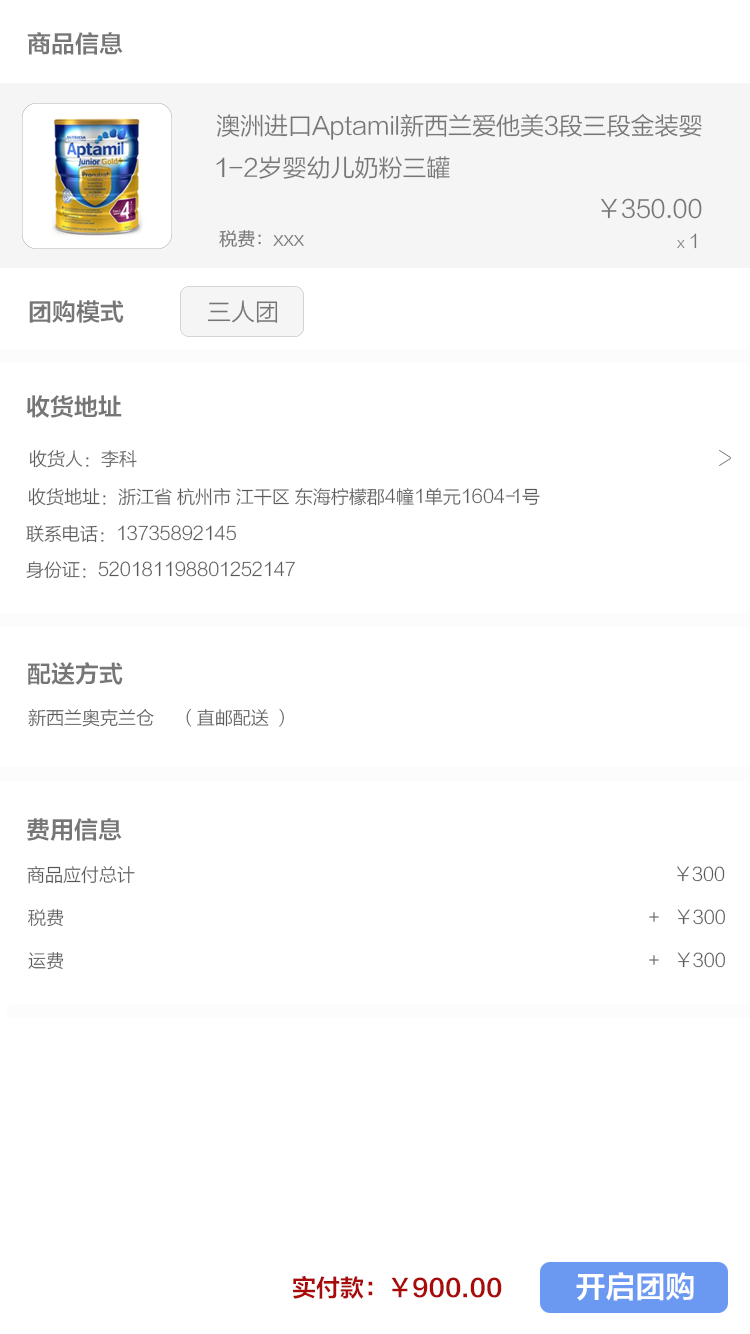
<style>
.page{position:relative;width:750px;height:1334px;background:#ffffff}
.page>*{position:absolute;margin:0}
.t1{font:24px "FZLTZCHK--GBK1-0";color:#767676}
.t2{font:24px "FZLTXIHK--GBK1-0";color:#767676}
.t3{font:18px "FZLTXIHK--GBK1-0";color:#747474}
.t4{font:14px "FZLTXHJW--GB1-0";color:#767676}
.t5{font:18px "FZLTXHJW--GB1-0";color:#767676}
.t6{font:18px "FZLTXHJW--GB1-0";color:#585858}
.t7{font:24px "FZLTZCHK--GBK1-0";color:#a90b0b}
.t8{font:30px "FZLTZCHK--GBK1-0";color:#ffffff}
</style>
<div class="page">
<p class="t1" style="left:27px;top:32px;width:96px;height:23px">商品信息</p>
<p class="t2" style="left:216px;top:114px;width:486px;height:65px">澳洲进口Aptamil新西兰爱他美3段三段金装婴<br>1-2岁婴幼儿奶粉三罐</p>
<p class="t2" style="left:601px;top:198px;width:101px;height:21px">￥350.00</p>
<p class="t3" style="left:219px;top:230px;width:85px;height:18px">税费：xxx</p>
<p class="t4" style="left:677px;top:233px;width:20px;height:16px">x <span class="t5">1</span></p>
<p class="t1" style="left:29px;top:300px;width:95px;height:23px">团购模式</p>
<p class="t2" style="left:207px;top:300px;width:71px;height:23px">三人团</p>
<p class="t1" style="left:26px;top:395px;width:96px;height:23px">收货地址</p>
<p class="t6" style="left:29px;top:450px;width:108px;height:18px">收货人：李科</p>
<p class="t6" style="left:28px;top:488px;width:512px;height:18px">收货地址：浙江省 杭州市 江干区 东海柠檬郡4幢1单元1604-1号</p>
<p class="t6" style="left:26px;top:525px;width:210px;height:18px">联系电话：13735892145</p>
<p class="t6" style="left:26px;top:561px;width:269px;height:18px">身份证：520181198801252147</p>
<p class="t1" style="left:28px;top:662px;width:95px;height:23px">配送方式</p>
<p class="t6" style="left:28px;top:708px;width:256px;height:19px">新西兰奥克兰仓     （直邮配送 ）</p>
<p class="t1" style="left:26px;top:818px;width:96px;height:23px">费用信息</p>
<p class="t6" style="left:27px;top:866px;width:698px;height:18px">商品应付总计                                                                                                            ￥300</p>
<p class="t6" style="left:28px;top:909px;width:697px;height:18px">税费                                                                                                                     +   ￥300</p>
<p class="t6" style="left:28px;top:952px;width:697px;height:18px">运费                                                                                                                     +   ￥300</p>
<p class="t7" style="left:293px;top:1276px;width:209px;height:23px">实付款：￥900.00</p>
<p class="t8" style="left:576px;top:1272px;width:118px;height:29px">开启团购</p>
</div>
